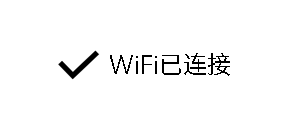
<style>
.page{position:relative;width:296px;height:128px;background:#ffffff}
.page>*{position:absolute;margin:0}
.t1{font:24px "OPPOSans-R";color:#000000}
</style>
<div class="page">
<p class="t1" style="left:110px;top:53px;width:120px;height:23px">WiFi已连接</p>
</div>
